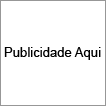
<style>
.page{position:relative;width:106px;height:106px;background:#ffffff}
.page>*{position:absolute;margin:0}
.t1{font:13.1px "ArialMT";color:#000000}
</style>
<div class="page">
<p class="t1" style="left:4px;top:47px;width:97px;height:13px">Publicidade Aqui</p>
</div>
